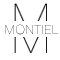
<style>
.page{position:relative;width:60px;height:60px;background:#ffffff}
.page>*{position:absolute;margin:0}
.t1{font:12.4px "HelveticaNeue-UltraLight";letter-spacing:0.08em;text-transform:uppercase}
</style>
<div class="page">
<p class="t1" style="left:5px;top:24px;width:54px;height:11px">MONTIEL</p>
</div>
